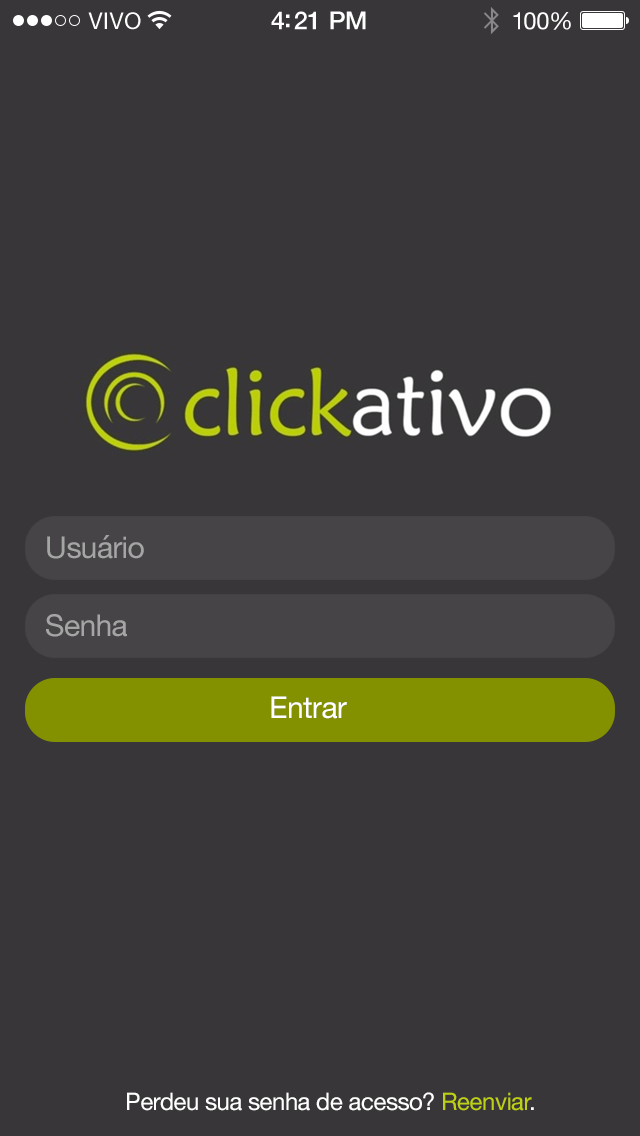
<style>
.page{position:relative;width:640px;height:1136px;background:#383638}
.page>*{position:absolute;margin:0}
.t1{font:30px "HelveticaNeue";letter-spacing:-0.02em;color:#a5a5a5}
.t2{font:30px "HelveticaNeue";letter-spacing:-0.02em;color:#ffffff}
.t3{font:24px "HelveticaNeue";letter-spacing:-0.02em;color:#ffffff}
.t4{font:24px "HelveticaNeue";letter-spacing:-0.02em;color:#bed013}
</style>
<div class="page">
<p class="t1" style="left:47px;top:535px;width:97px;height:24px">Usuário</p>
<p class="t1" style="left:46px;top:614px;width:81px;height:23px">Senha</p>
<p class="t2" style="left:271px;top:696px;width:76px;height:23px">Entrar</p>
<p class="t3" style="left:127px;top:1092px;width:407px;height:19px">Perdeu sua senha de acesso? <span class="t4">Reenviar</span>.</p>
</div>
